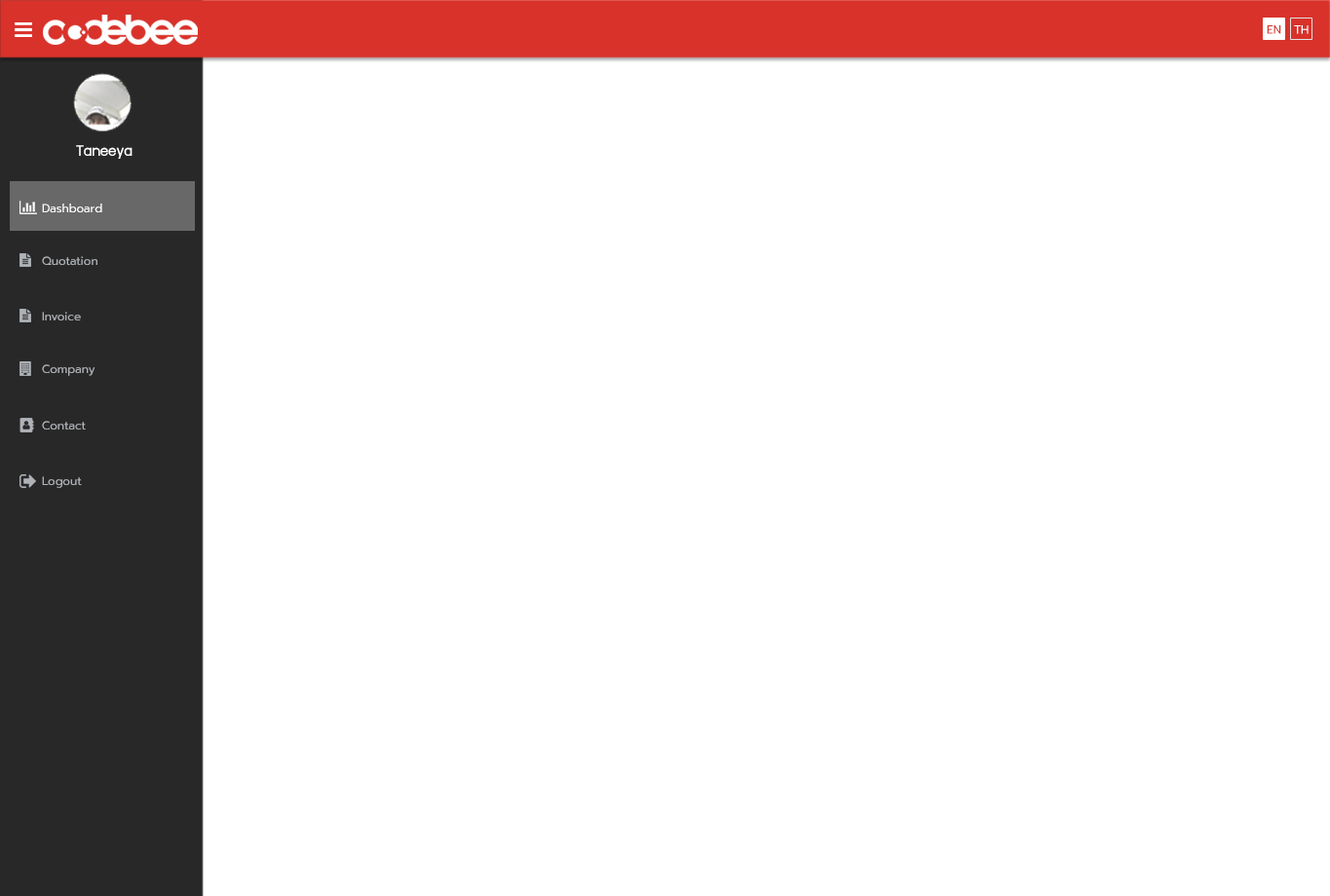
<style>
.page{position:relative;width:1330px;height:896px;background:#ffffff}
.page>*{position:absolute;margin:0}
.t1{font:11.7px "Prompt-Regular";color:#d8322b}
.t2{font:11.7px "Prompt-Regular";color:#ffffff}
.t3{font:17.5px "supermarket";color:#ffffff}
.t4{font:11.7px "Prompt-Regular";color:#aeb2b7}
</style>
<div class="page">
<p class="t1" style="left:1267px;top:25px;width:14px;height:9px">EN</p>
<p class="t2" style="left:1294px;top:25px;width:15px;height:9px">TH</p>
<p class="t3" style="left:76px;top:145px;width:57px;height:14px">Taneeya</p>
<p class="t2" style="left:42px;top:204px;width:60px;height:9px">Dashboard</p>
<p class="t4" style="left:42px;top:256px;width:55px;height:10px">Quotation</p>
<p class="t4" style="left:42px;top:312px;width:39px;height:10px">Invoice</p>
<p class="t4" style="left:42px;top:364px;width:53px;height:12px">Company</p>
<p class="t4" style="left:42px;top:421px;width:44px;height:10px">Contact</p>
<p class="t4" style="left:42px;top:477px;width:40px;height:11px">Logout</p>
</div>
